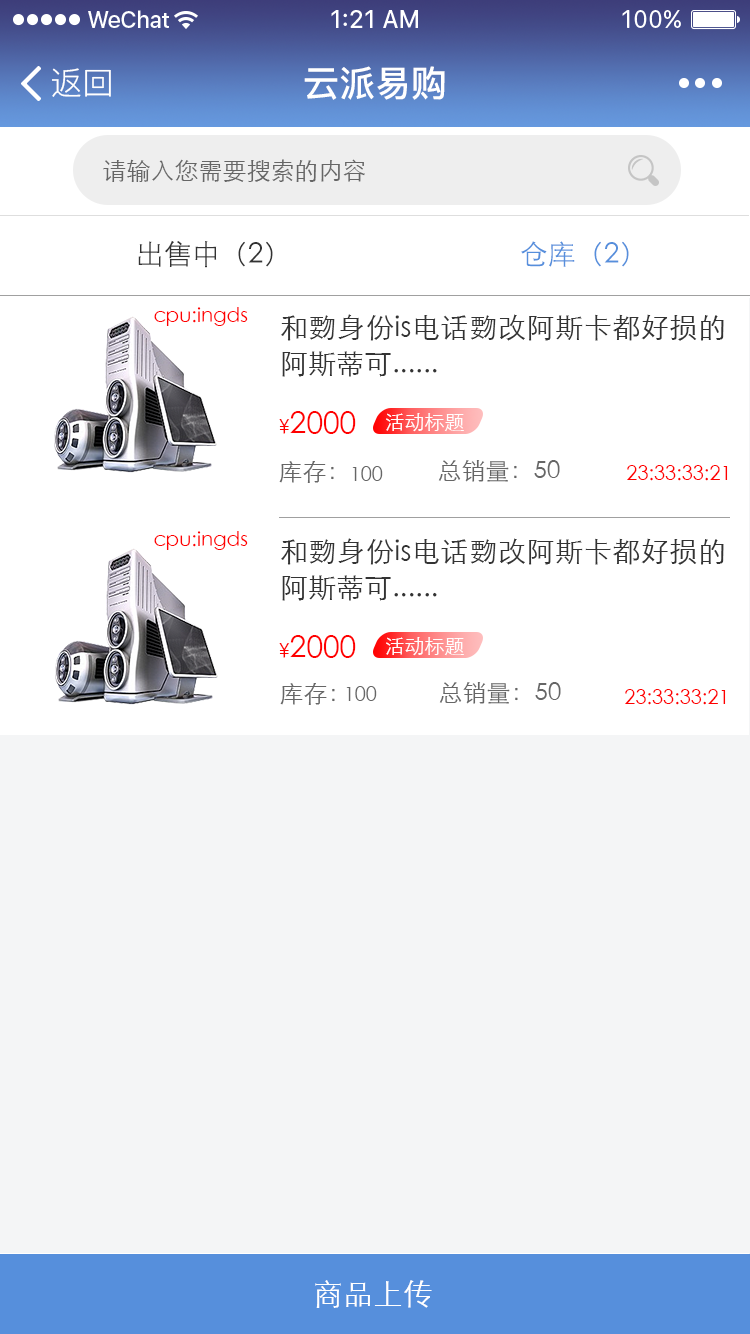
<style>
.page{position:relative;width:750px;height:1334px;background:#f4f5f6}
.page>*{position:absolute;margin:0}
.t1{font:32px "PingFang-SC-Regular";color:#ffffff}
.t2{font:36px "PingFang-SC-Bold";color:#ffffff}
.t3{font:24px "STXihei";color:#666666}
.t4{font:28px "STXihei";color:#333333}
.t5{font:28px "STXihei";color:#568fdc}
.t6{font:20px "STXihei";color:#ff0000}
.t7{font:28px/36px "STXihei";color:#333333}
.t8{font:30px "STXihei";color:#ff0000}
.t9{font:20px "STXihei";color:#ffffff}
.t10{font:20px "STXihei";color:#666666}
.t11{font:30px "STXihei";color:#ffffff}
</style>
<div class="page">
<p class="t1" style="left:52px;top:68px;width:59px;height:29px">返回</p>
<p class="t2" style="left:304px;top:66px;width:141px;height:34px">云派易购</p>
<p class="t3" style="left:103px;top:159px;width:262px;height:23px">请输入您需要搜索的内容</p>
<p class="t4" style="left:138px;top:240px;width:135px;height:28px">出售中（2）</p>
<p class="t5" style="left:521px;top:241px;width:108px;height:26px">仓库（2）</p>
<p class="t6" style="left:154px;top:307px;width:94px;height:19px">cpu:ingds</p>
<p class="t7" style="left:281px;top:314px;width:443px;height:63px;text-align:justify">和覅身份is电话覅改阿斯卡都好损的阿斯蒂可......</p>
<p class="t8" style="left:279px;top:411px;width:77px;height:23px"><span class="t6">¥</span>2000</p>
<p class="t9" style="left:386px;top:413px;width:78px;height:19px">活动标题</p>
<p class="t3" style="left:279px;top:461px;width:55px;height:22px">库存：</p>
<p class="t3" style="left:438px;top:460px;width:122px;height:22px">总销量：50</p>
<p class="t10" style="left:352px;top:466px;width:31px;height:15px">100</p>
<p class="t6" style="left:627px;top:465px;width:101px;height:16px">23:33:33:21</p>
<p class="t6" style="left:154px;top:531px;width:94px;height:19px">cpu:ingds</p>
<p class="t7" style="left:281px;top:538px;width:443px;height:63px;text-align:justify">和覅身份is电话覅改阿斯卡都好损的阿斯蒂可......</p>
<p class="t8" style="left:279px;top:635px;width:77px;height:23px"><span class="t6">¥</span>2000</p>
<p class="t9" style="left:386px;top:637px;width:78px;height:19px">活动标题</p>
<p class="t3" style="left:280px;top:683px;width:55px;height:22px">库存：</p>
<p class="t10" style="left:346px;top:686px;width:31px;height:15px">100</p>
<p class="t3" style="left:439px;top:682px;width:122px;height:22px">总销量：50</p>
<p class="t6" style="left:625px;top:689px;width:101px;height:16px">23:33:33:21</p>
<p class="t11" style="left:315px;top:1280px;width:117px;height:28px">商品上传</p>
</div>
